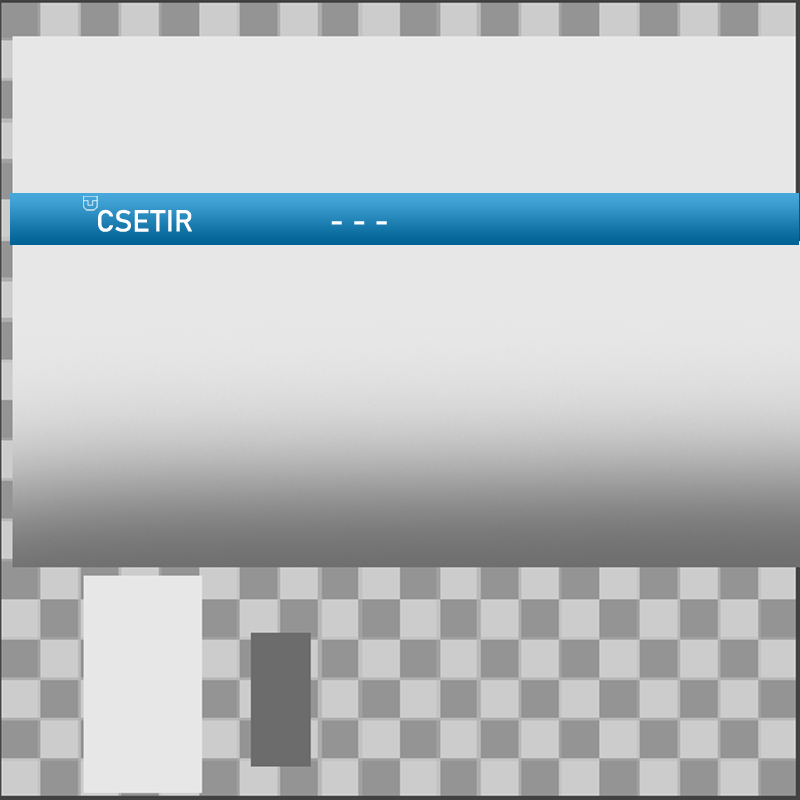
<style>
.page{position:relative;width:800px;height:800px;background:#e7e7e7}
.page>*{position:absolute;margin:0}
.t1{font:30px "Bahnschrift";color:#ffffff}
</style>
<div class="page">
<p class="t1" style="left:98px;top:209px;width:95px;height:23px">CSETIR</p>
<p class="t1" style="left:331px;top:221px;width:56px;height:4px">- - -</p>
</div>
